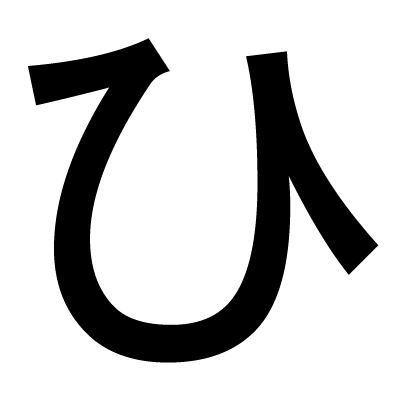
<style>
.page{position:relative;width:400px;height:400px;background:#ffffff}
.page>*{position:absolute;margin:0}
.t1{font:416.7px "MS-PGothic";color:#000000}
</style>
<div class="page">
<p class="t1" style="left:28px;top:38px;width:351px;height:325px">ひ</p>
</div>
